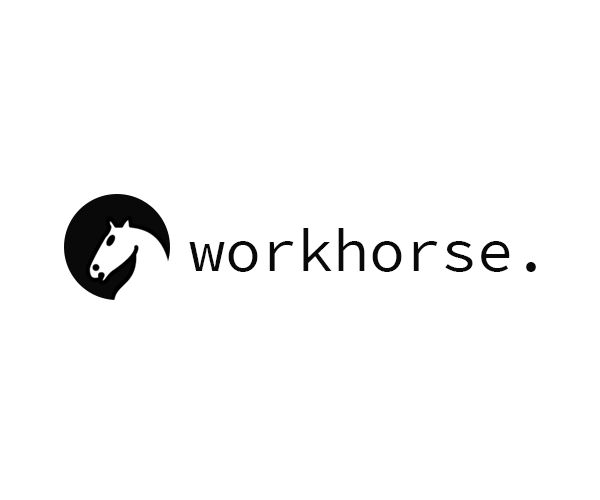
<style>
.page{position:relative;width:600px;height:500px;background:#ffffff}
.page>*{position:absolute;margin:0}
.t1{font:60px "SourceCodePro-Regular";color:#090909}
</style>
<div class="page">
<p class="t1" style="left:189px;top:228px;width:347px;height:44px">workhorse.</p>
</div>
